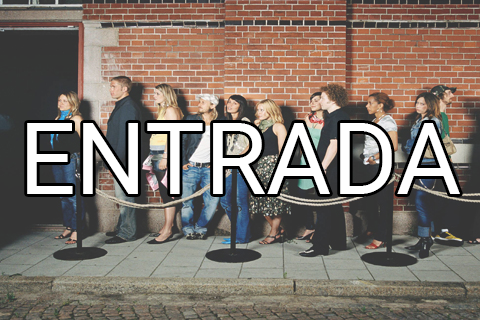
<style>
.page{position:relative;width:480px;height:320px}
.page>*{position:absolute;margin:0}
.t1{font:100px "Roboto-Regular";color:#ffffff}
</style>
<div class="page">
<p class="t1" style="left:27px;top:123px;width:433px;height:71px">ENTRADA</p>
</div>
